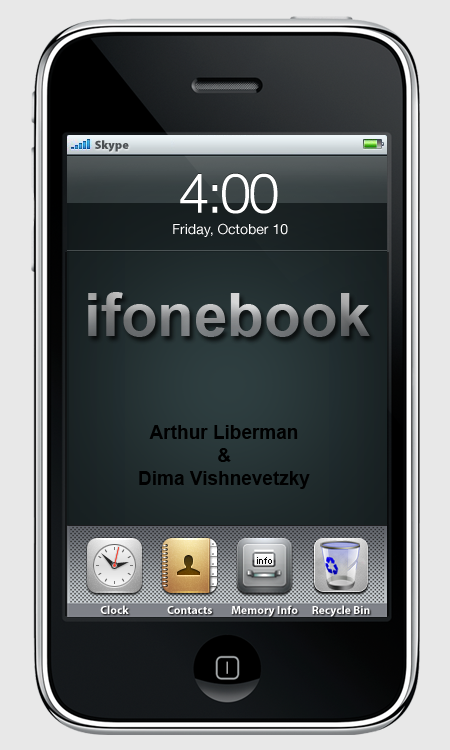
<style>
.page{position:relative;width:450px;height:750px}
.page>*{position:absolute;margin:0}
.t1{font:12px "MyriadPro-Black";color:#4b4f52}
.t2{font:55px "HelveticaNeue-Light";letter-spacing:-0.04em;color:#ffffff}
.t3{font:14px "HelveticaNeue";color:#ffffff}
.t4{font:60px "Arial-BoldMT"}
.t5{font:19px "Arial-BoldMT";color:#000000}
.t6{font:10px "ArialMT";color:#000000}
.t7{font:11.7px "MyriadPro-Bold";color:#ffffff}
</style>
<div class="page">
<p class="t1" style="left:95px;top:140px;width:34px;height:12px">Skype</p>
<p class="t2" style="left:180px;top:173px;width:98px;height:41px">4:00</p>
<p class="t3" style="left:173px;top:223px;width:115px;height:14px">Friday, October 10</p>
<p class="t4" style="left:88px;top:292px;width:282px;height:45px">ifonebook</p>
<p class="t5" style="left:139px;top:425px;width:171px;height:64px;text-align:center">Arthur Liberman<br>&amp;<br>Dima Vishnevetzky</p>
<p class="t6" style="left:257px;top:557px;width:15px;height:7px">info</p>
<p class="t7" style="left:100px;top:605px;width:29px;height:9px">Clock</p>
<p class="t7" style="left:167px;top:606px;width:45px;height:8px">Contacts</p>
<p class="t7" style="left:231px;top:605px;width:67px;height:12px">Memory Info</p>
<p class="t7" style="left:312px;top:605px;width:58px;height:12px">Recycle Bin</p>
</div>
